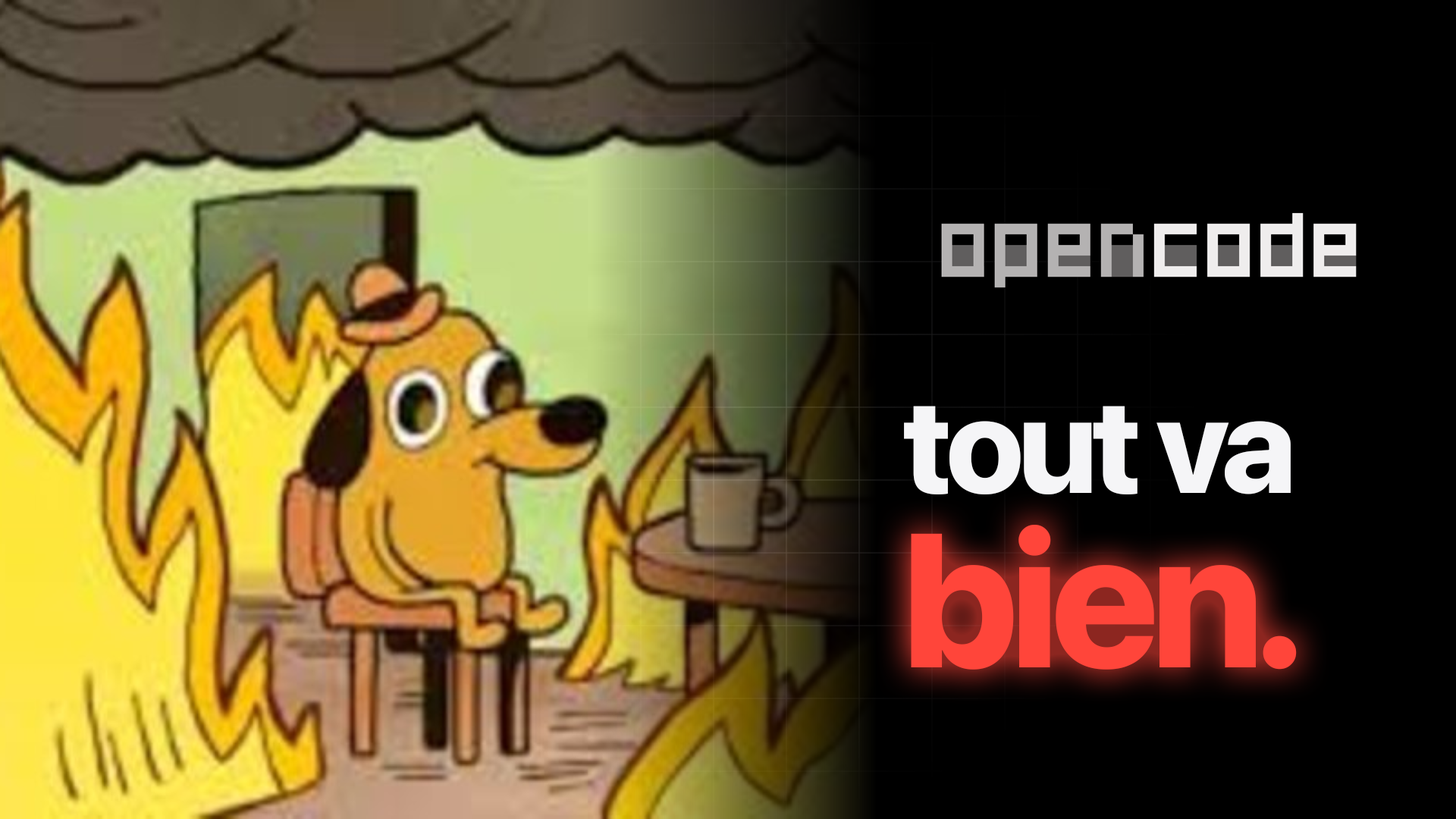
<style>
.page{position:relative;width:1456px;height:819px;background:#000000}
.page>*{position:absolute;margin:0}
.t1{font:132.7px ".SFNS-Regular";letter-spacing:-0.04em;color:#f5f5f7}
.t2{font:189.6px ".SFNS-Regular";letter-spacing:-0.04em;color:#ff453a}
</style>
<div class="page">
<p class="t1" style="left:903px;top:406px;width:388px;height:89px">tout va</p>
<p class="t2" style="left:910px;top:525px;width:387px;height:145px">bien.</p>
</div>
